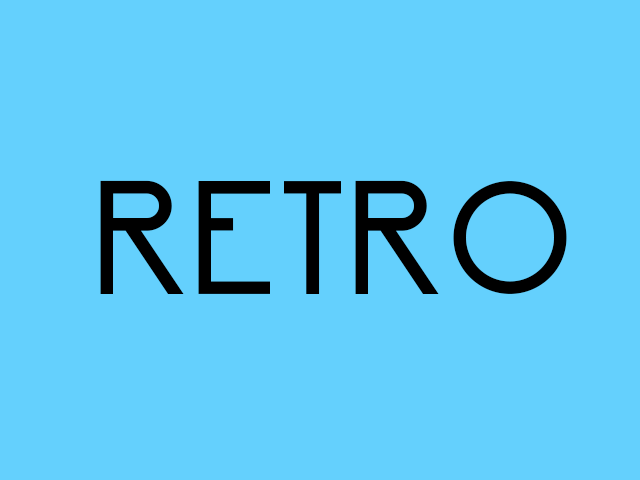
<style>
.page{position:relative;width:640px;height:480px;background:#64d0fd}
.page>*{position:absolute;margin:0}
.t1{font:180px "surrounding-reg";color:#000000}
</style>
<div class="page">
<p class="t1" style="left:100px;top:180px;width:467px;height:114px">RETRO</p>
</div>
